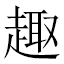
<style>
.page{position:relative;width:64px;height:64px;background:#ffffff}
.page>*{position:absolute;margin:0}
.t1{font:60px "SimSun";color:#000000}
</style>
<div class="page">
<p class="t1" style="left:4px;top:5px;width:56px;height:54px">趣</p>
</div>
